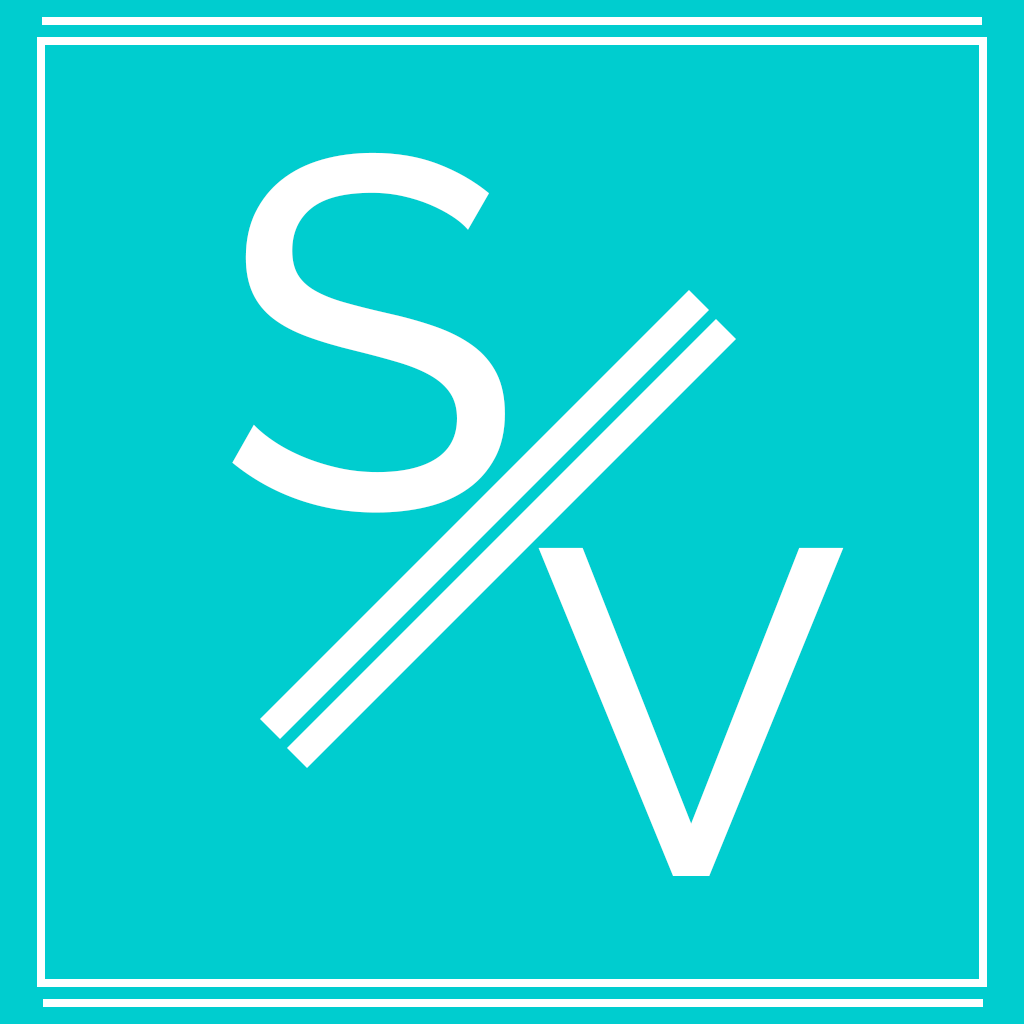
<style>
.page{position:relative;width:1024px;height:1024px;background:#00cdcf}
.page>*{position:absolute;margin:0}
.t1{font:498px "Raleway-Medium";color:#ffffff}
.t2{font:462px "Raleway-Medium";color:#ffffff}
</style>
<div class="page">
<p class="t1" style="left:232px;top:152px;width:273px;height:361px">S</p>
<p class="t2" style="left:538px;top:547px;width:306px;height:329px">V</p>
</div>
